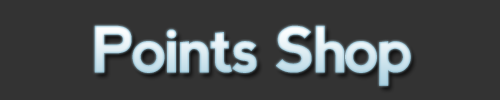
<style>
.page{position:relative;width:500px;height:100px;background:#333333}
.page>*{position:absolute;margin:0}
.t1{font:63.7px "nevis-Bold";letter-spacing:-0.05em}
</style>
<div class="page">
<p class="t1" style="left:94px;top:25px;width:317px;height:61px">Points Shop</p>
</div>
